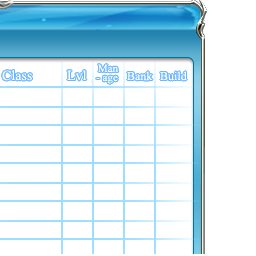
<style>
.page{position:relative;width:256px;height:256px;background:#ffffff}
.page>*{position:absolute;margin:0}
.t1{font:11px "TimesNewRomanPSMT";color:#ffffff}
.t2{font:14px "TimesNewRomanPSMT";color:#ffffff}
.t3{font:12px "TimesNewRomanPSMT";color:#ffffff}
</style>
<div class="page">
<p class="t1" style="left:98px;top:64px;width:21px;height:9px">Man</p>
<p class="t2" style="left:2px;top:70px;width:30px;height:11px">Class</p>
<p class="t2" style="left:67px;top:70px;width:20px;height:11px">Lvl</p>
<p class="t3" style="left:127px;top:71px;width:26px;height:10px">Bank</p>
<p class="t3" style="left:160px;top:71px;width:27px;height:10px">Build</p>
</div>
